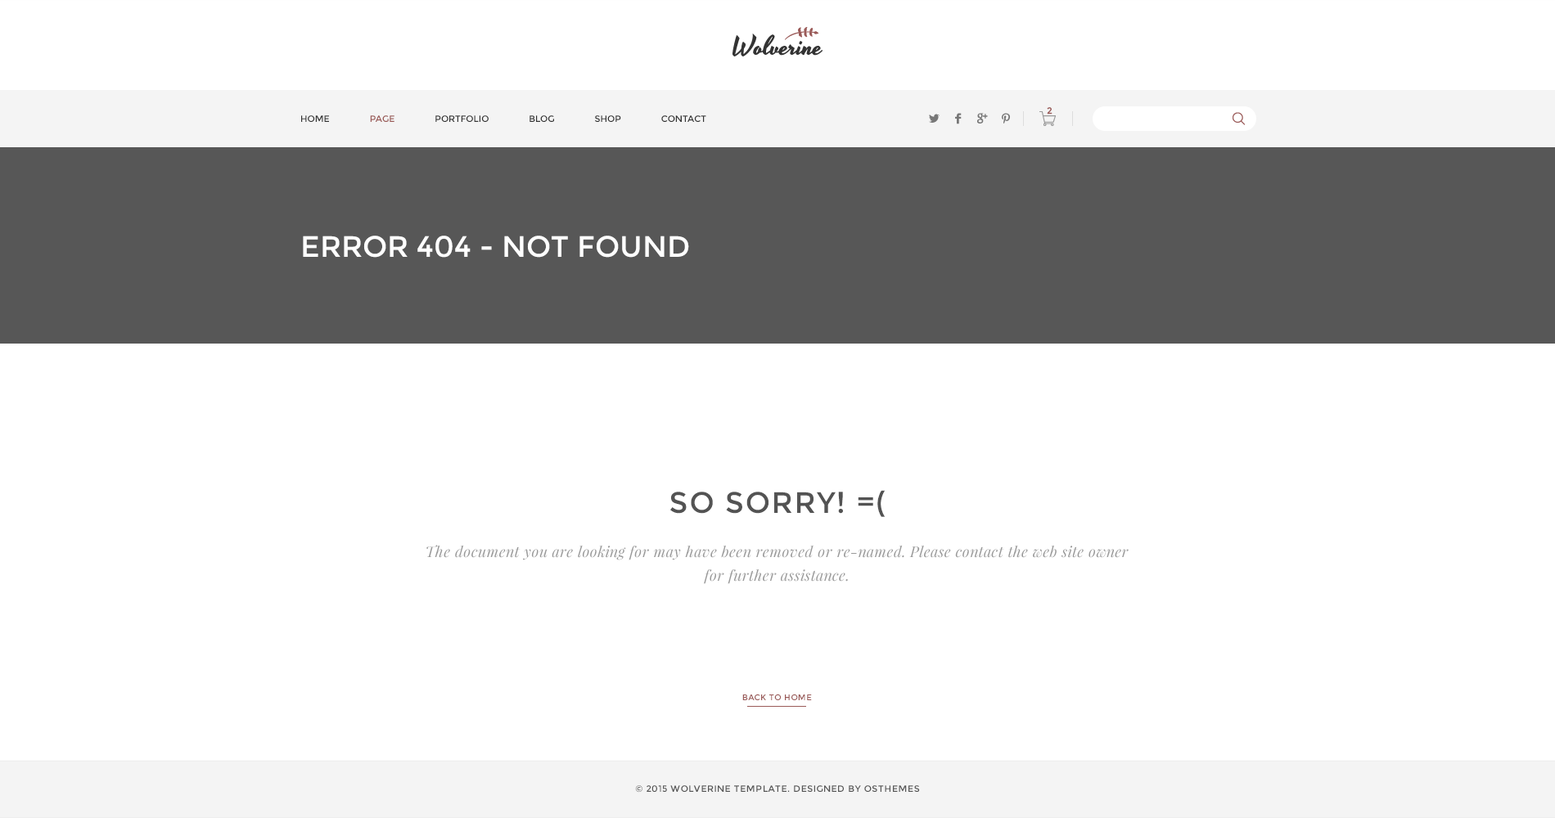
<style>
.page{position:relative;width:1555px;height:818px;background:#ffffff}
.page>*{position:absolute;margin:0}
.t1{font:9px "Montserrat-Regular";color:#9a5a58;font-weight:bold}
.t2{font:9px "Montserrat-Regular";color:#333333}
.t3{font:9px "Montserrat-Regular";color:#9b5a57}
.t4{font:29.5px "Montserrat-Regular";color:#ffffff}
.t5{font:29.5px "Montserrat-Regular";letter-spacing:0.05em;color:#535353}
.t6{font:14.7px/23.6px "PlayfairDisplay-Italic";letter-spacing:0.02em;color:#999999}
.t7{font:8.2px "Montserrat-Regular";letter-spacing:0.04em;color:#9a5a58}
.t8{font:9px "Montserrat-Regular";letter-spacing:0.05em;color:#555555}
</style>
<div class="page">
<p class="t1" style="left:1046px;top:107px;width:6px;height:8px">2</p>
<p class="t2" style="left:301px;top:115px;width:405px;height:7px">HOME      <span class="t3">PAGE</span>      PORTFOLIO      BLOG      SHOP      CONTACT</p>
<p class="t4" style="left:303px;top:236px;width:386px;height:22px">ERROR 404 - NOT FOUND</p>
<p class="t5" style="left:670px;top:490px;width:215px;height:27px">SO SORRY! =(</p>
<p class="t6" style="left:426px;top:545px;width:702px;height:39px;text-align:center">The document you are looking for may have been removed or re-named. Please contact the web site owner for further assistance.</p>
<p class="t7" style="left:742px;top:694px;width:70px;height:6px">BACK TO HOME</p>
<p class="t8" style="left:635px;top:785px;width:285px;height:8px">© 2015 WOLVERINE TEMPLATE. DESIGNED BY OSTHEMES</p>
</div>
